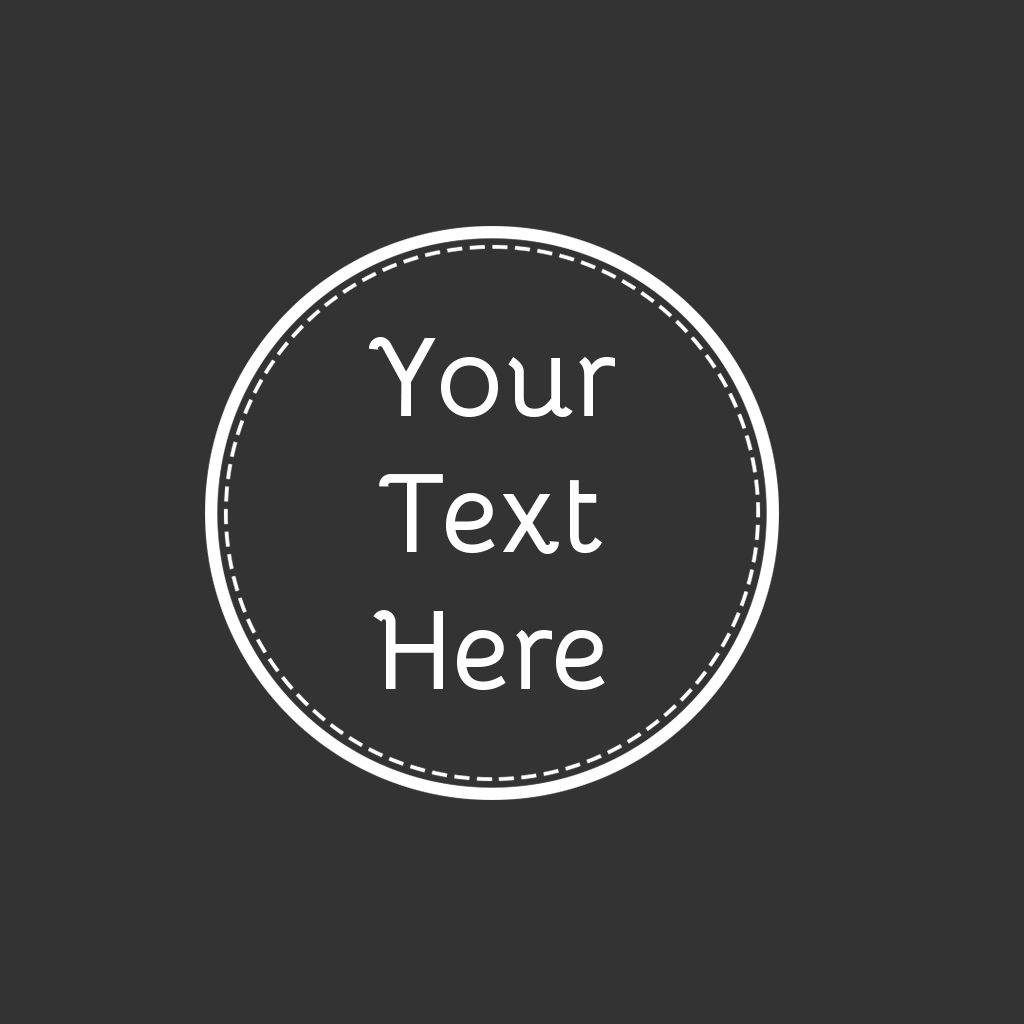
<style>
.page{position:relative;width:1024px;height:1024px;background:#333333}
.page>*{position:absolute;margin:0}
.t1{font:113.8px "Bellota-Bold";color:#ffffff}
</style>
<div class="page">
<p class="t1" style="left:369px;top:336px;width:246px;height:355px;text-align:center">Your<br>Text<br>Here</p>
</div>
